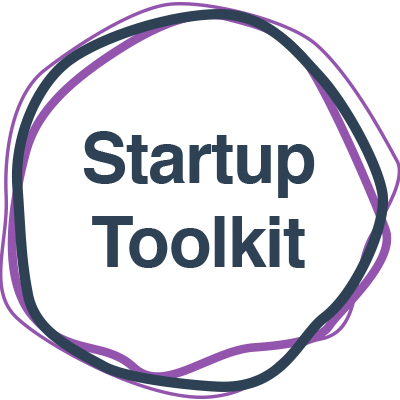
<style>
.page{position:relative;width:400px;height:400px;background:#ffffff}
.page>*{position:absolute;margin:0}
.t1{font:69.9px "Helvetica-Bold";letter-spacing:-0.02em;color:#314559}
</style>
<div class="page">
<p class="t1" style="left:84px;top:131px;width:231px;height:137px;text-align:center">Startup<br>Toolkit</p>
</div>
